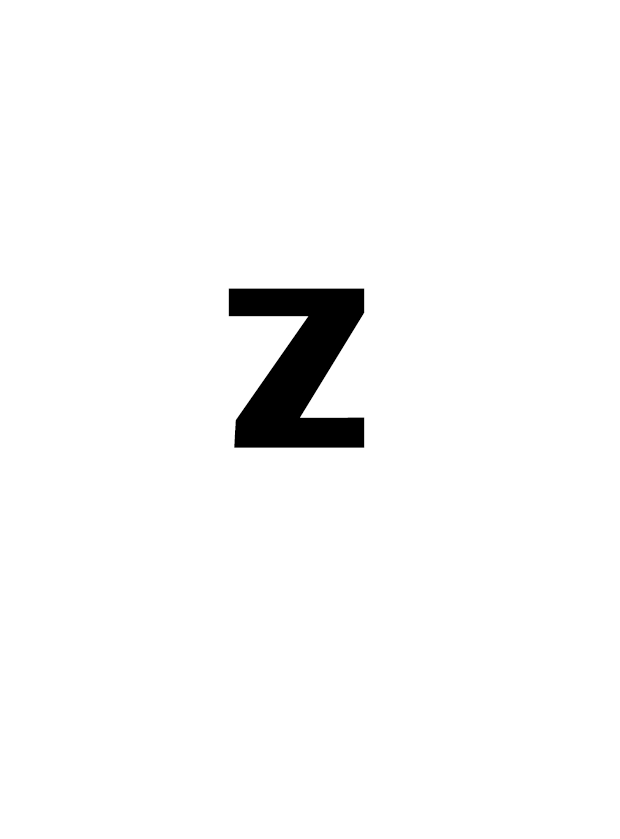
<style>
.page{position:relative;width:620px;height:839px;background:#ffffff}
.page>*{position:absolute;margin:0}
.t1{font:217.2px "HandDrawnShapes";color:#000000;scale:1.41 1}
</style>
<div class="page">
<p class="t1" style="left:228px;top:288px;width:137px;height:160px">Z</p>
</div>
